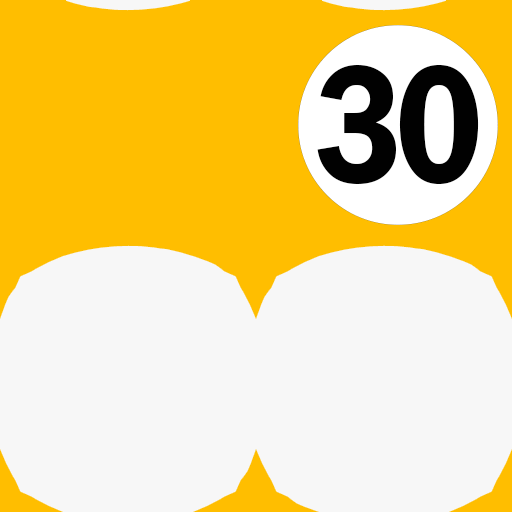
<style>
.page{position:relative;width:512px;height:512px;background:#f7f7f7}
.page>*{position:absolute;margin:0}
.t1{font:172.5px "FranklinGothic-Demi";letter-spacing:-0.05em;color:#010101;scale:0.87 1}
</style>
<div class="page">
<p class="t1" style="left:317px;top:65px;width:162px;height:119px">30</p>
</div>
